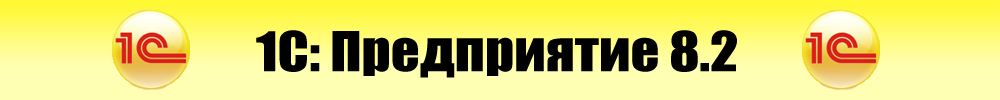
<style>
.page{position:relative;width:1000px;height:100px;background:#ffffb4}
.page>*{position:absolute;margin:0}
.t1{font:50.7px "Impact";color:#000000;scale:1.11 1}
</style>
<div class="page">
<p class="t1" style="left:256px;top:30px;width:481px;height:48px">1С: Предприятие 8.2</p>
</div>
